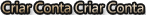
<style>
.page{position:relative;width:146px;height:15px;background:#141414}
.page>*{position:absolute;margin:0}
.t1{font:14px "MicrosoftNewTaiLue"}
</style>
<div class="page">
<p class="t1" style="left:2px;top:2px;width:69px;height:11px">Criar Conta</p>
<p class="t1" style="left:75px;top:2px;width:69px;height:11px">Criar Conta</p>
</div>
